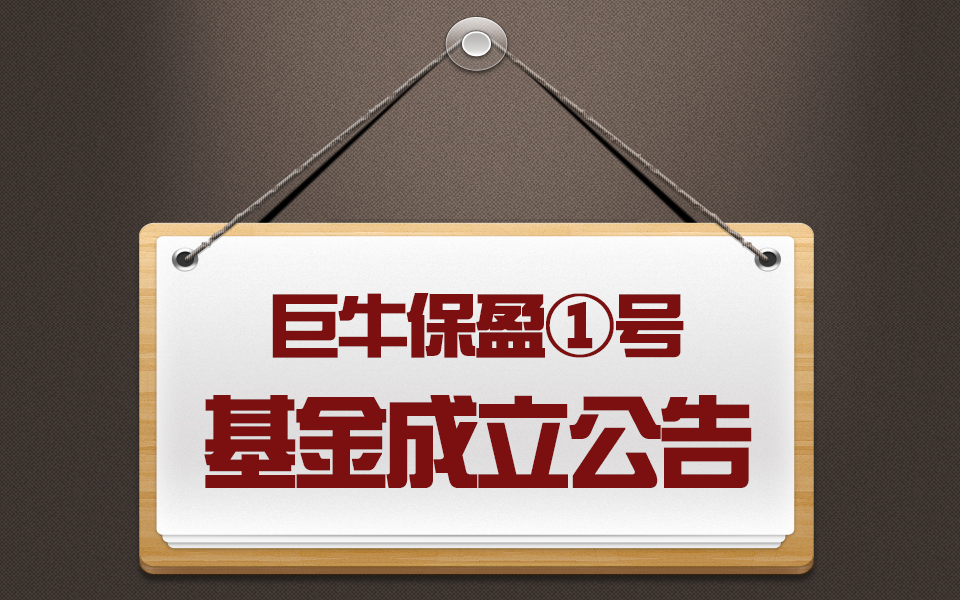
<style>
.page{position:relative;width:960px;height:600px}
.page>*{position:absolute;margin:0}
.t1{font:66.7px "SingyiEG-Ultra-GB";letter-spacing:-0.035em;color:#7c0f0f;font-weight:bold;scale:1.04 1}
.t2{font:96px "SingyiEG-Ultra-GB";letter-spacing:-0.035em;color:#7c0f0f;font-weight:bold;scale:0.96 1}
</style>
<div class="page">
<p class="t1" style="left:272px;top:293px;width:412px;height:65px">巨牛保盈①号</p>
<p class="t2" style="left:204px;top:395px;width:548px;height:93px">基金成立公告</p>
</div>
